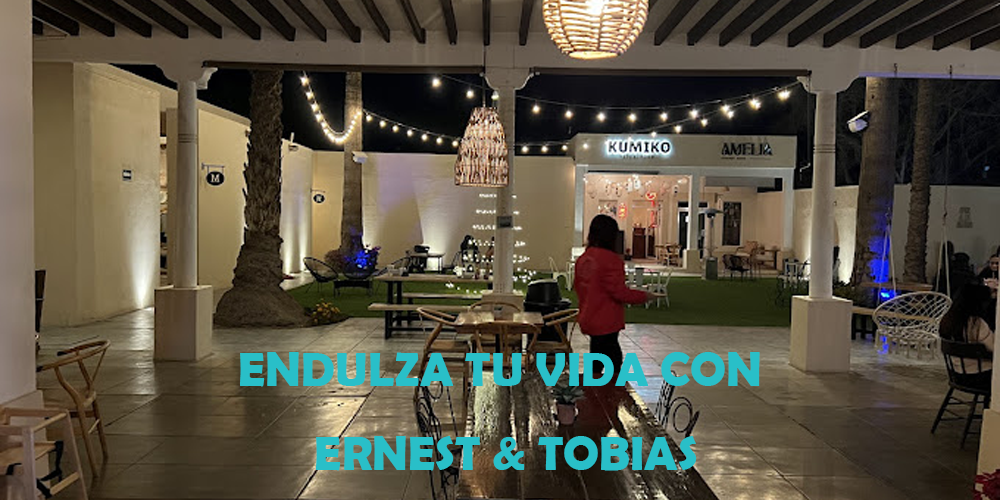
<style>
.page{position:relative;width:1000px;height:500px}
.page>*{position:absolute;margin:0}
.t1{font:48px "BerlinSansFBDemi-Bold";color:#29bfc8}
</style>
<div class="page">
<p class="t1" style="left:240px;top:352px;width:520px;height:119px;text-align:center">ENDULZA TU VIDA CON<br> ERNEST &amp; TOBIAS</p>
</div>
